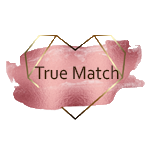
<style>
.page{position:relative;width:150px;height:150px;background:#ffffff}
.page>*{position:absolute;margin:0}
.t1{font:19.1px "Corbel";color:#301b00;scale:0.95 1}
</style>
<div class="page">
<p class="t1" style="left:34px;top:65px;width:85px;height:15px">True Match</p>
</div>
